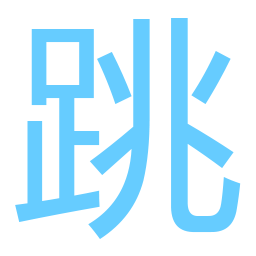
<style>
.page{position:relative;width:256px;height:256px;background:#ffffff}
.page>*{position:absolute;margin:0}
.t1{font:229.2px "MicrosoftYaHei";color:#66ccff}
</style>
<div class="page">
<p class="t1" style="left:15px;top:18px;width:226px;height:221px">跳</p>
</div>
